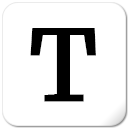
<style>
.page{position:relative;width:128px;height:128px;background:#ffffff}
.page>*{position:absolute;margin:0}
.t1{font:96px "Merriweather-Regular";color:#000000;font-weight:bold}
</style>
<div class="page">
<p class="t1" style="left:30px;top:28px;width:66px;height:74px">T</p>
</div>
